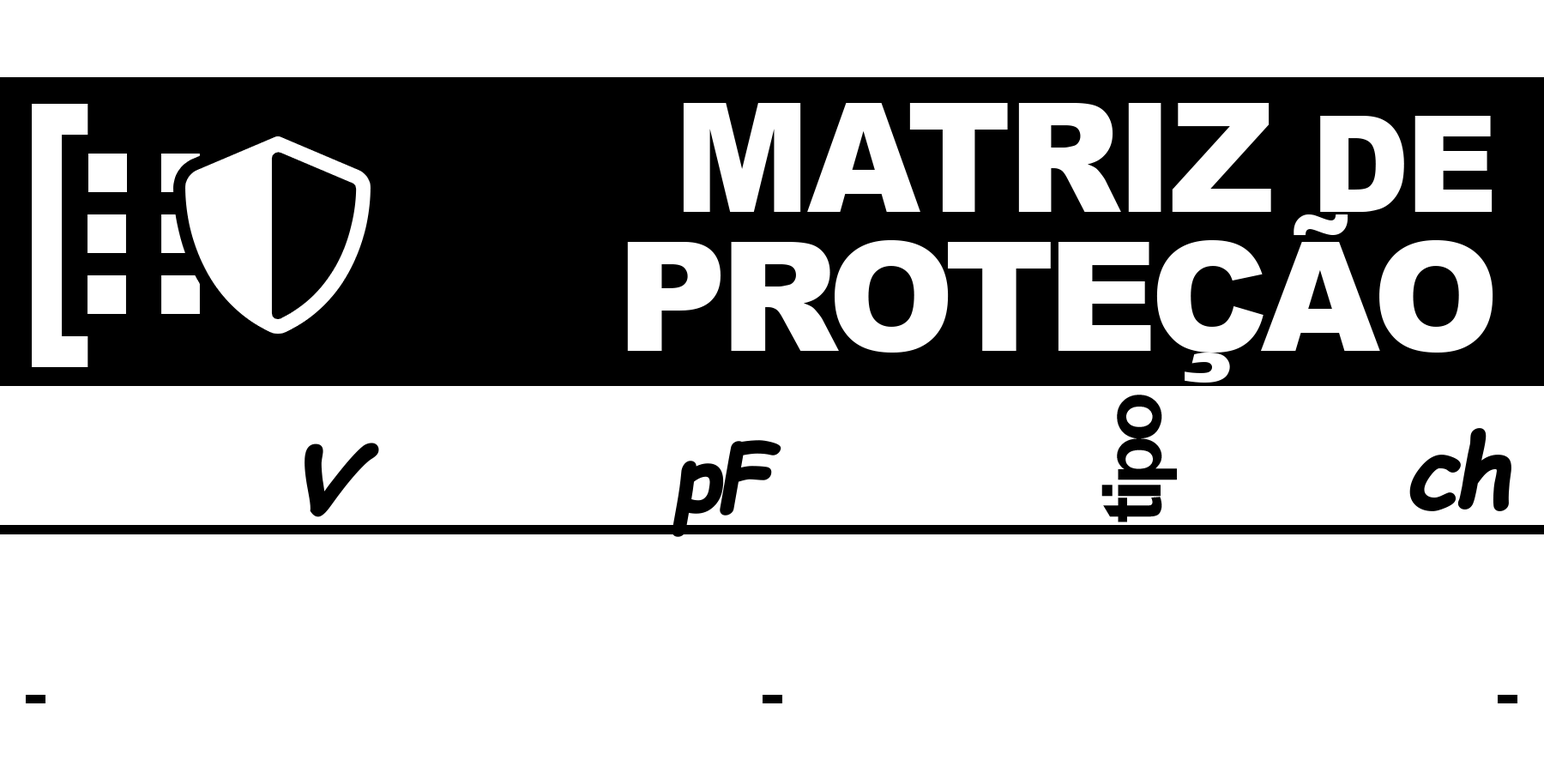
<style>
.page{position:relative;width:1544px;height:772px;background:#ffffff}
.page>*{position:absolute;margin:0}
.t1{font:287.2px "Arial-BoldMT";letter-spacing:0.77em;color:#ffffff;scale:0.8 1}
.t2{font:152.5px "Arial-Black";letter-spacing:-0.025em;color:#ffffff;scale:0.95 1}
.t3{font:133.5px "Arial-Black";letter-spacing:-0.025em;color:#ffffff;scale:0.95 1}
.t4{font:153.1px "Arial-Black";letter-spacing:-0.05em;color:#ffffff}
.t5{font:125.7px "Arial-Black";letter-spacing:-0.05em;color:#ffffff}
.t6{font:81.7px "Arial-BoldMT";letter-spacing:-0.075em;color:#000000}
.t7{font:99.9px "ComicSansMS-Bold";letter-spacing:-0.075em;color:#000000;font-weight:bold;font-style:italic}
.t8{font:127.1px "SegoePrint-Bold";letter-spacing:-0.15em;color:#000000;font-weight:bold;font-style:italic}
.t9{font:90.8px "ComicSansMS-Bold";letter-spacing:-0.075em;color:#000000;font-weight:bold;font-style:italic}
</style>
<div class="page">
<p class="t1" style="left:32px;top:104px;width:56px;height:263px">[</p>
<p class="t2" style="left:683px;top:103px;width:810px;height:109px">MATRIZ <span class="t3">DE</span></p>
<p class="t4" style="left:627px;top:214px;width:867px;height:169px"><span class="t5"><br></span>PROTEÇÃO</p>
<p class="t6" style="left:1102px;top:395px;width:75px;height:127px;rotate:-90deg">tipo</p>
<p class="t7" style="left:1410px;top:428px;width:102px;height:83px">ch</p>
<p class="t8" style="left:305px;top:443px;width:74px;height:74px">v</p>
<p class="t9" style="left:672px;top:440px;width:110px;height:97px">pF</p>
</div>
